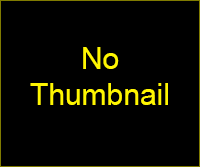
<style>
.page{position:relative;width:200px;height:167px;background:#000000}
.page>*{position:absolute;margin:0}
.t1{font:30px "ArialMT";color:#fff601}
</style>
<div class="page">
<p class="t1" style="left:30px;top:47px;width:138px;height:58px;text-align:center">No<br>Thumbnail</p>
</div>
